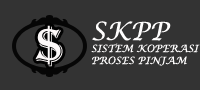
<style>
.page{position:relative;width:200px;height:90px;background:#333333}
.page>*{position:absolute;margin:0}
.t1{font:48px "Algerian";color:#fdfafa}
.t2{font:10px "LucidaCalligraphy-Italic";color:#fffefe}
.t3{font:25px "LucidaCalligraphy-Italic";color:#fffefe}
</style>
<div class="page">
<p class="t1" style="left:35px;top:25px;width:28px;height:42px">$</p>
<p class="t2" style="left:91px;top:21px;width:109px;height:45px"><span class="t3">SKPP<br></span>SISTEM KOPERASI <br>PROSES PINJAM</p>
</div>
